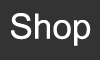
<style>
.page{position:relative;width:100px;height:60px;background:#333333}
.page>*{position:absolute;margin:0}
.t1{font:35.1px "ArialMT";color:#ffffff}
</style>
<div class="page">
<p class="t1" style="left:11px;top:13px;width:80px;height:33px">Shop</p>
</div>
